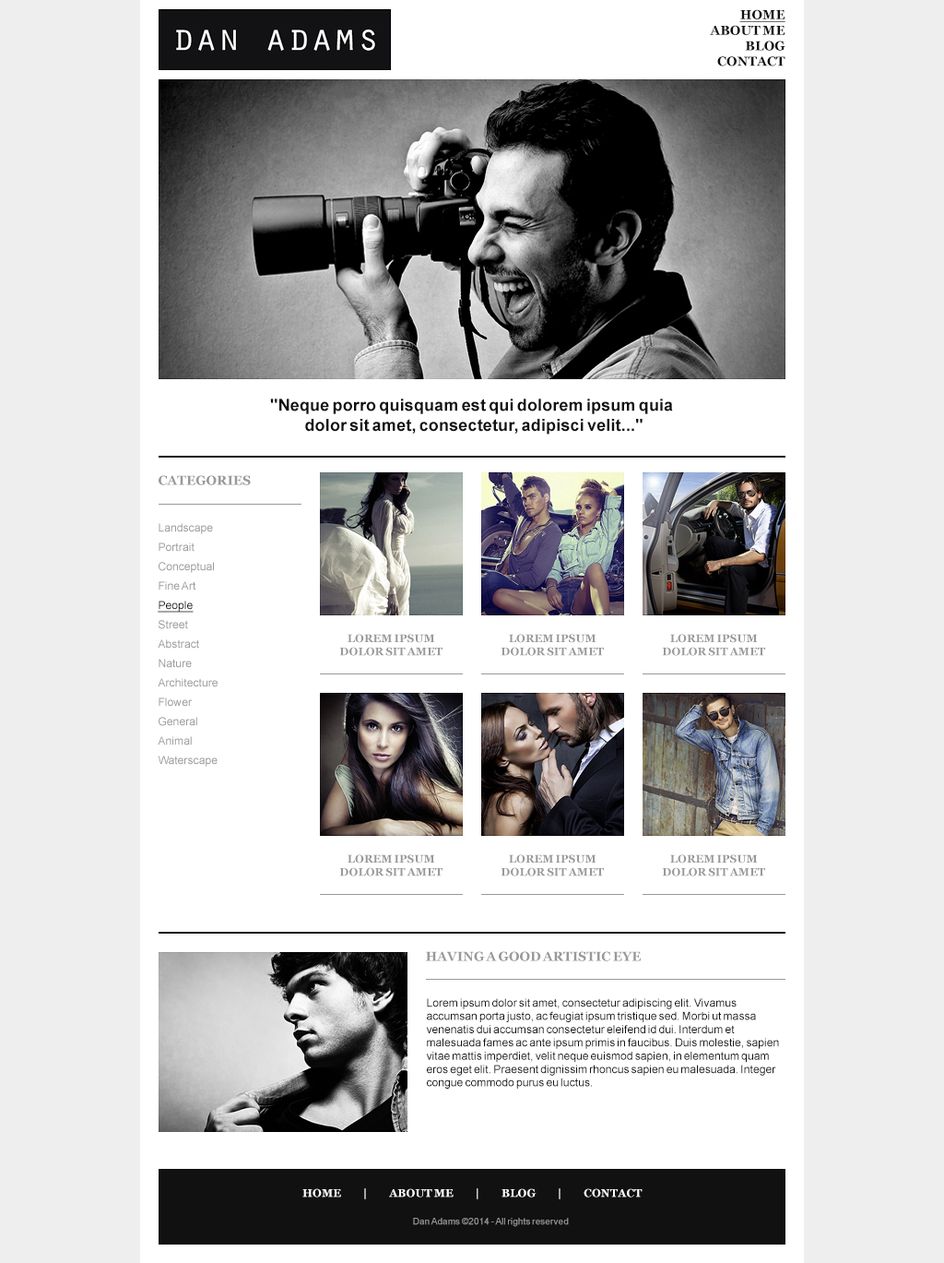
<style>
.page{position:relative;width:944px;height:1263px;background:#ffffff}
.page>*{position:absolute;margin:0}
.t1{font:12.9px "Georgia-Bold";color:#111111}
.t2{font:12.9px "Georgia-Bold";color:#111111;text-decoration:underline}
.t3{font:16.6px "Arial-BoldMT";color:#111111}
.t4{font:12.9px "Georgia-Bold";color:#999999}
.t5{font:11.1px/19.4px "ArialMT";color:#999999}
.t6{font:11.1px/19.4px "ArialMT";color:#111111;text-decoration:underline}
.t7{font:11.1px "Georgia-Bold";color:#999999}
.t8{font:11.1px "ArialMT";color:#111111}
.t9{font:11.1px "Georgia-Bold";color:#ffffff}
.t10{font:9.2px "ArialMT";color:#999999}
</style>
<div class="page">
<p class="t1" style="left:710px;top:9px;width:76px;height:57px;text-align:right"><span class="t2">HOME<br></span>ABOUT ME<br>BLOG<br>CONTACT</p>
<p class="t3" style="left:270px;top:398px;width:403px;height:36px;text-align:center">"Neque porro quisquam est qui dolorem ipsum quia <br>dolor sit amet, consectetur, adipisci velit..."</p>
<p class="t4" style="left:159px;top:475px;width:92px;height:10px">CATEGORIES</p>
<p class="t5" style="left:158px;top:523px;width:60px;height:243px">Landscape<br>Portrait<br>Conceptual<br>Fine Art<br><span class="t6">People<br></span>Street<br>Abstract<br>Nature<br>Architecture<br>Flower<br>General<br>Animal<br>Waterscape</p>
<p class="t7" style="left:339px;top:634px;width:104px;height:22px;text-align:center">LOREM IPSUM DOLOR SIT AMET</p>
<p class="t7" style="left:501px;top:634px;width:103px;height:22px;text-align:center">LOREM IPSUM DOLOR SIT AMET</p>
<p class="t7" style="left:662px;top:634px;width:103px;height:22px;text-align:center">LOREM IPSUM DOLOR SIT AMET</p>
<p class="t7" style="left:339px;top:854px;width:104px;height:22px;text-align:center">LOREM IPSUM DOLOR SIT AMET</p>
<p class="t7" style="left:501px;top:854px;width:103px;height:22px;text-align:center">LOREM IPSUM DOLOR SIT AMET</p>
<p class="t7" style="left:662px;top:854px;width:103px;height:22px;text-align:center">LOREM IPSUM DOLOR SIT AMET</p>
<p class="t4" style="left:426px;top:951px;width:215px;height:10px">HAVING A GOOD ARTISTIC EYE</p>
<p class="t8" style="left:426px;top:998px;width:353px;height:90px">Lorem ipsum dolor sit amet, consectetur adipiscing elit. Vivamus accumsan porta justo, ac feugiat ipsum tristique sed. Morbi ut massa venenatis dui accumsan consectetur eleifend id dui. Interdum et malesuada fames ac ante ipsum primis in faucibus. Duis molestie, sapien vitae mattis imperdiet, velit neque euismod sapien, in elementum quam eros eget elit. Praesent dignissim rhoncus sapien eu malesuada. Integer congue commodo purus eu luctus.</p>
<p class="t9" style="left:303px;top:1188px;width:340px;height:11px">HOME            |            ABOUT ME            |            BLOG            |            CONTACT</p>
<p class="t10" style="left:413px;top:1217px;width:156px;height:10px">Dan Adams ©2014 - All rights reserved</p>
</div>
